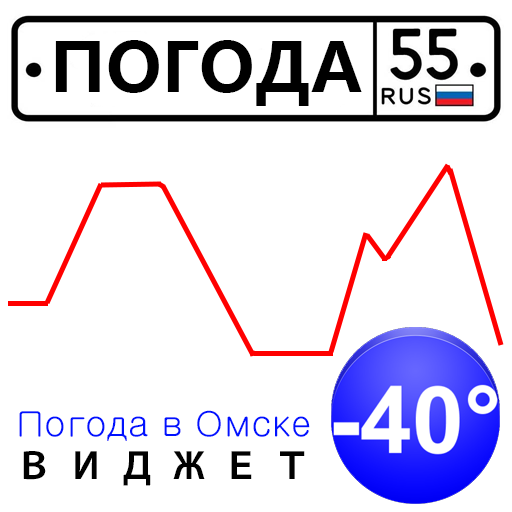
<style>
.page{position:relative;width:512px;height:512px;background:#ffffff}
.page>*{position:absolute;margin:0}
.t1{font:68px "MicrosoftYaHei-Bold";color:#000000}
.t2{font:36px "KozGoPr6N-Bold";color:#010101}
.t3{font:36px "Gulim";color:#0012ff}
</style>
<div class="page">
<p class="t1" style="left:55px;top:40px;width:307px;height:66px">ПОГОДА</p>
<p class="t2" style="left:19px;top:410px;width:291px;height:76px"><span class="t3">Погода в Омске<br></span>В  И  Д  Ж  Е  Т</p>
</div>
